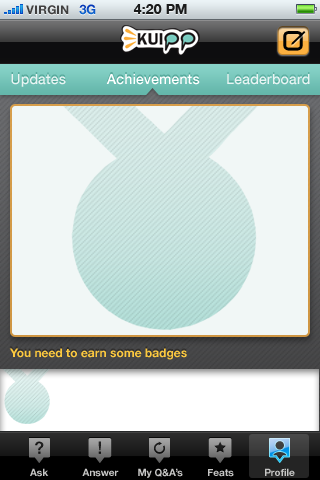
<style>
.page{position:relative;width:320px;height:480px;background:#f1f7f6}
.page>*{position:absolute;margin:0}
.t1{font:12px "HelveticaNeue-Bold";color:#404040;text-transform:uppercase}
.t2{font:13px "HelveticaNeue-Bold";color:#0c54c5;text-transform:uppercase}
.t3{font:14px "HelveticaNeue-Bold";color:#1a1b1b;text-transform:uppercase}
.t4{font:14px "HelveticaNeue-Medium";letter-spacing:0.01em;color:#e9f4f3}
.t5{font:14px "HelveticaNeue-Medium";letter-spacing:0.01em;color:#ffffff}
.t6{font:12px "HelveticaNeue-Bold";color:#fcc940}
.t7{font:10px "HelveticaNeue-Bold";color:#c6c6c5}
</style>
<div class="page">
<p class="t1" style="left:26px;top:5px;width:43px;height:10px">VIRGIN</p>
<p class="t2" style="left:79px;top:4px;width:17px;height:11px">3G</p>
<p class="t3" style="left:133px;top:4px;width:54px;height:10px">4:20 PM</p>
<p class="t4" style="left:11px;top:74px;width:55px;height:13px">Updates</p>
<p class="t5" style="left:106px;top:74px;width:94px;height:11px">Achievements</p>
<p class="t4" style="left:227px;top:74px;width:83px;height:11px">Leaderboard</p>
<p class="t6" style="left:9px;top:348px;width:178px;height:12px">You need to earn some badges</p>
<p class="t7" style="left:30px;top:468px;width:19px;height:9px">Ask</p>
<p class="t7" style="left:82px;top:468px;width:37px;height:9px">Answer</p>
<p class="t7" style="left:138px;top:468px;width:45px;height:10px">My Q&amp;A’s</p>
<p class="t7" style="left:208px;top:469px;width:26px;height:8px">Feats</p>
<p class="t7" style="left:265px;top:468px;width:30px;height:8px">Profile</p>
</div>
